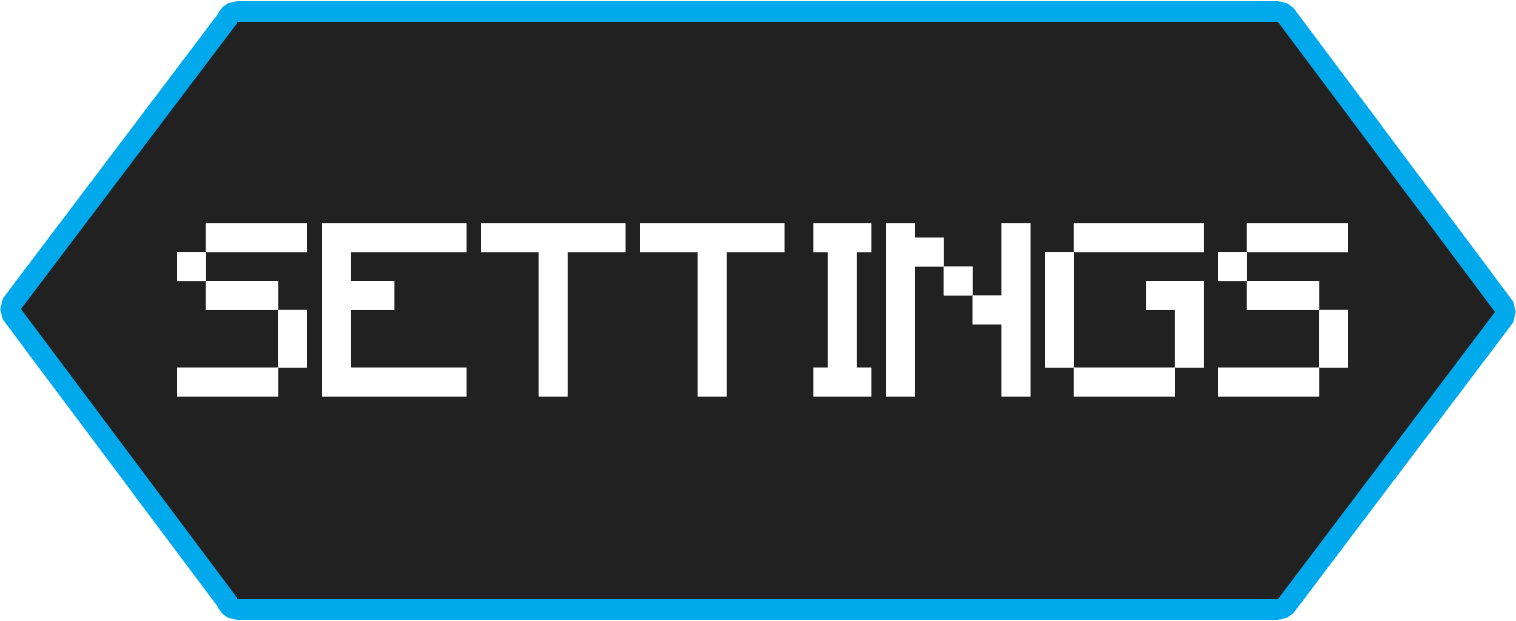
<style>
.page{position:relative;width:1516px;height:621px;background:#212121}
.page>*{position:absolute;margin:0}
.t1{font:231.3px "Minecraft";color:#ffffff}
</style>
<div class="page">
<p class="t1" style="left:177px;top:223px;width:1171px;height:174px">SETTINGS</p>
</div>
